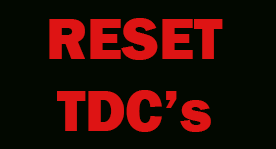
<style>
.page{position:relative;width:276px;height:149px;background:#020800}
.page>*{position:absolute;margin:0}
.t1{font:60px "FranklinGothic-Heavy";color:#de1414}
</style>
<div class="page">
<p class="t1" style="left:49px;top:18px;width:174px;height:114px;text-align:center">RESET<br>TDC’s</p>
</div>
